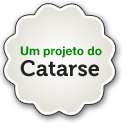
<style>
.page{position:relative;width:128px;height:128px;background:#ffffff}
.page>*{position:absolute;margin:0}
.t1{font:12px "HelveticaNeue-Bold";color:#008800}
.t2{font:22px "Museo-700";color:#222222}
</style>
<div class="page">
<p class="t1" style="left:20px;top:46px;width:82px;height:12px">Um projeto do</p>
<p class="t2" style="left:20px;top:60px;width:79px;height:17px">Catarse</p>
</div>
